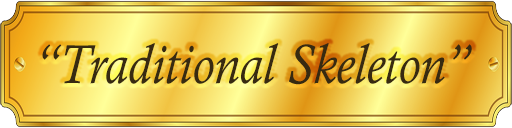
<style>
.page{position:relative;width:512px;height:128px}
.page>*{position:absolute;margin:0}
.t1{font:56.3px "CalistoMT-Italic";color:#372a11;scale:0.88 1}
</style>
<div class="page">
<p class="t1" style="left:42px;top:43px;width:430px;height:42px">“Traditional Skeleton”</p>
</div>
